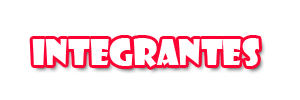
<style>
.page{position:relative;width:300px;height:100px;background:#ffffff}
.page>*{position:absolute;margin:0}
.t1{font:35px "ShowcardGothic-Reg";color:#ffffff}
</style>
<div class="page">
<p class="t1" style="left:32px;top:38px;width:227px;height:29px">Integrantes</p>
</div>
